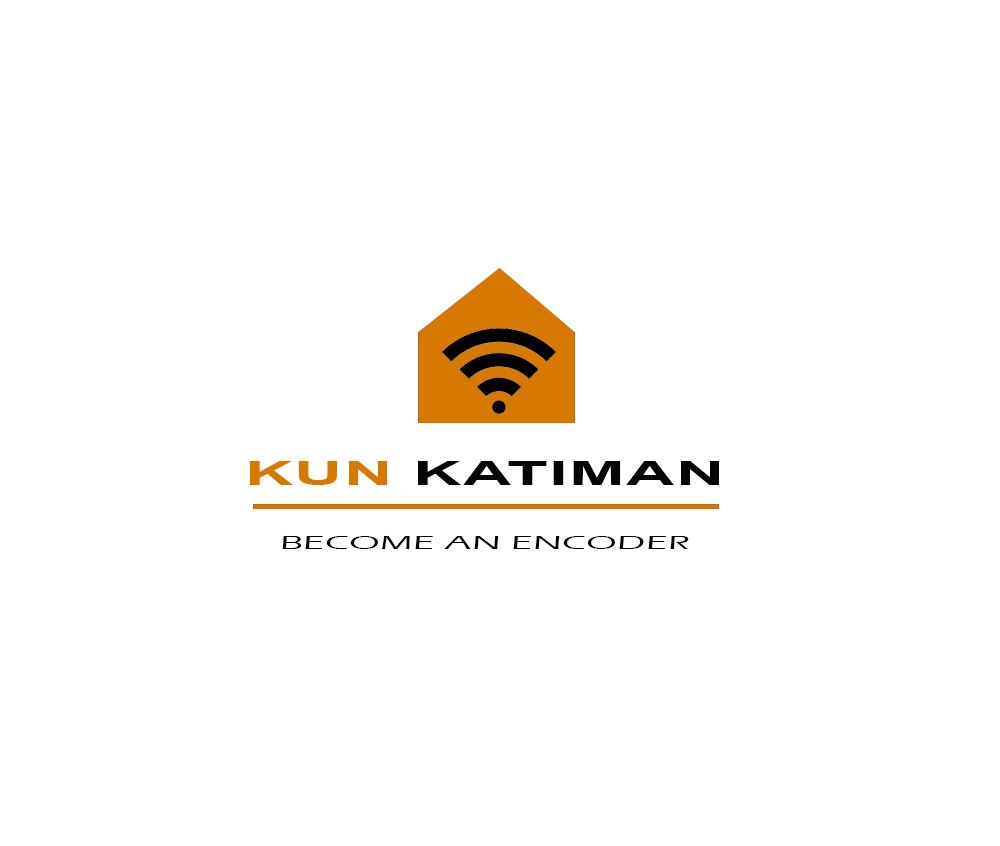
<style>
.page{position:relative;width:1000px;height:846px;background:#ffffff}
.page>*{position:absolute;margin:0}
.t1{font:33.3px "Arial-BoldMT";letter-spacing:0.02em;color:#060606;scale:2 1}
.t2{font:33.3px "Arial-BoldMT";letter-spacing:0.02em;color:#d77900;scale:2 1}
.t3{font:18.8px "ErasITC-Medium";letter-spacing:0.02em;color:#070200;scale:2 1}
</style>
<div class="page">
<p class="t1" style="left:250px;top:461px;width:469px;height:24px"><span class="t2">KUN</span> KATIMAN</p>
<p class="t3" style="left:282px;top:536px;width:407px;height:13px">BECOME AN ENCODER</p>
</div>
